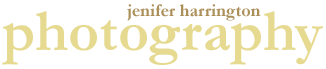
<style>
.page{position:relative;width:326px;height:69px;background:#ffffff}
.page>*{position:absolute;margin:0}
.t1{font:17.9px "Garamond-Bold";color:#ab8f59}
.t2{font:59.8px "Garamond-Bold";color:#e6d990}
</style>
<div class="page">
<p class="t1" style="left:127px;top:4px;width:134px;height:17px">jenifer harrington</p>
<p class="t2" style="left:2px;top:11px;width:321px;height:54px">photography</p>
</div>
